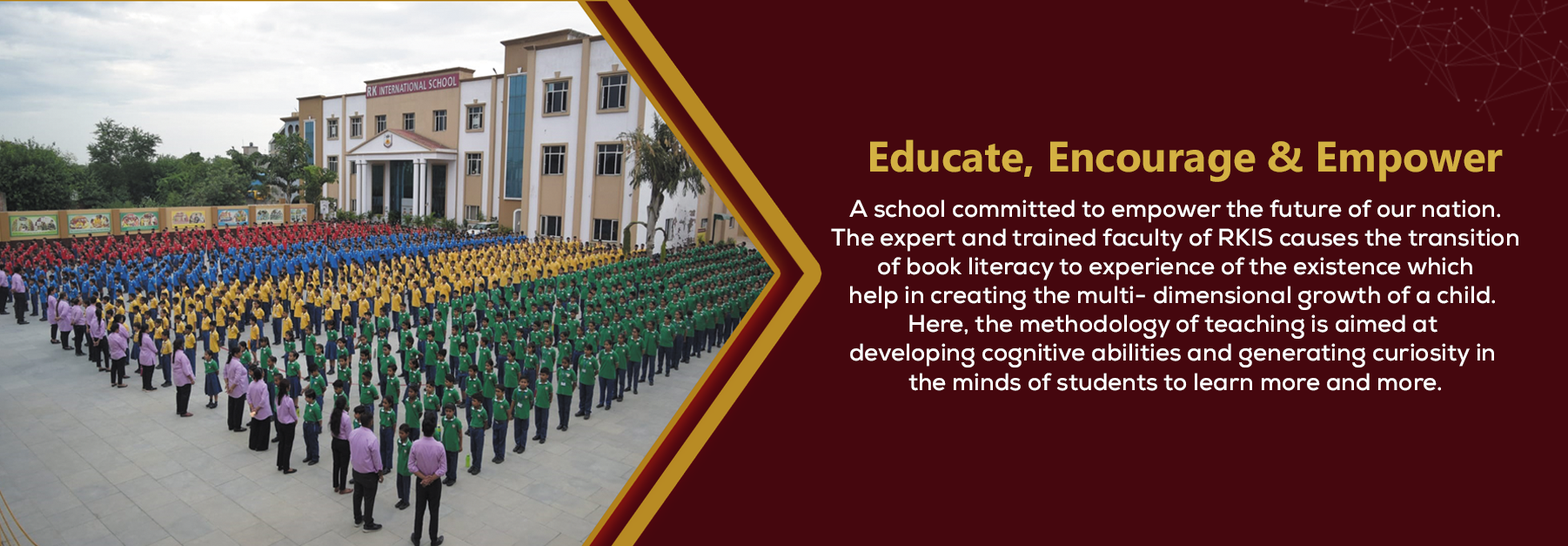
<style>
.page{position:relative;width:1568px;height:546px;background:#45070e}
.page>*{position:absolute;margin:0}
.t1{font:42.5px "NirmalaUI-Bold";color:#d3b143}
.t2{font:24px "Nexa-Bold";color:#ffffff}
</style>
<div class="page">
<p class="t1" style="left:870px;top:139px;width:633px;height:43px">Educate, Encourage &amp; Empower</p>
<p class="t2" style="left:831px;top:199px;width:687px;height:192px;text-align:center">A school committed to empower the future of our nation.<br>The expert and trained faculty of RKIS causes the transition<br> of book literacy to experience of the existence which <br>help in creating the multi- dimensional growth of a child. <br>Here, the methodology of teaching is aimed at <br>developing cognitive abilities and generating curiosity in <br>the minds of students to learn more and more.</p>
</div>
